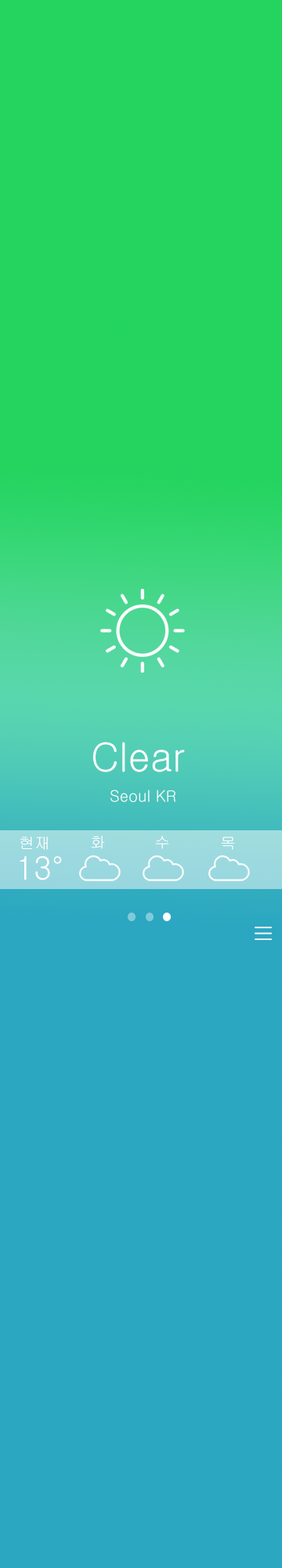
<style>
.page{position:relative;width:282px;height:1568px}
.page>*{position:absolute;margin:0}
.t1{font:39.2px "Gulim";color:#ffffff}
.t2{font:15.7px "Gulim";color:#ffffff}
.t3{font:31.4px "Gulim";color:#ffffff}
</style>
<div class="page">
<p class="t1" style="left:93px;top:742px;width:92px;height:30px">Clear</p>
<p class="t2" style="left:111px;top:789px;width:65px;height:13px">Seoul KR</p>
<p class="t2" style="left:20px;top:837px;width:28px;height:13px">현재</p>
<p class="t2" style="left:91px;top:836px;width:14px;height:13px">화</p>
<p class="t2" style="left:155px;top:836px;width:14px;height:13px">수</p>
<p class="t2" style="left:221px;top:837px;width:14px;height:13px">목</p>
<p class="t3" style="left:20px;top:856px;width:42px;height:24px">13°</p>
</div>
